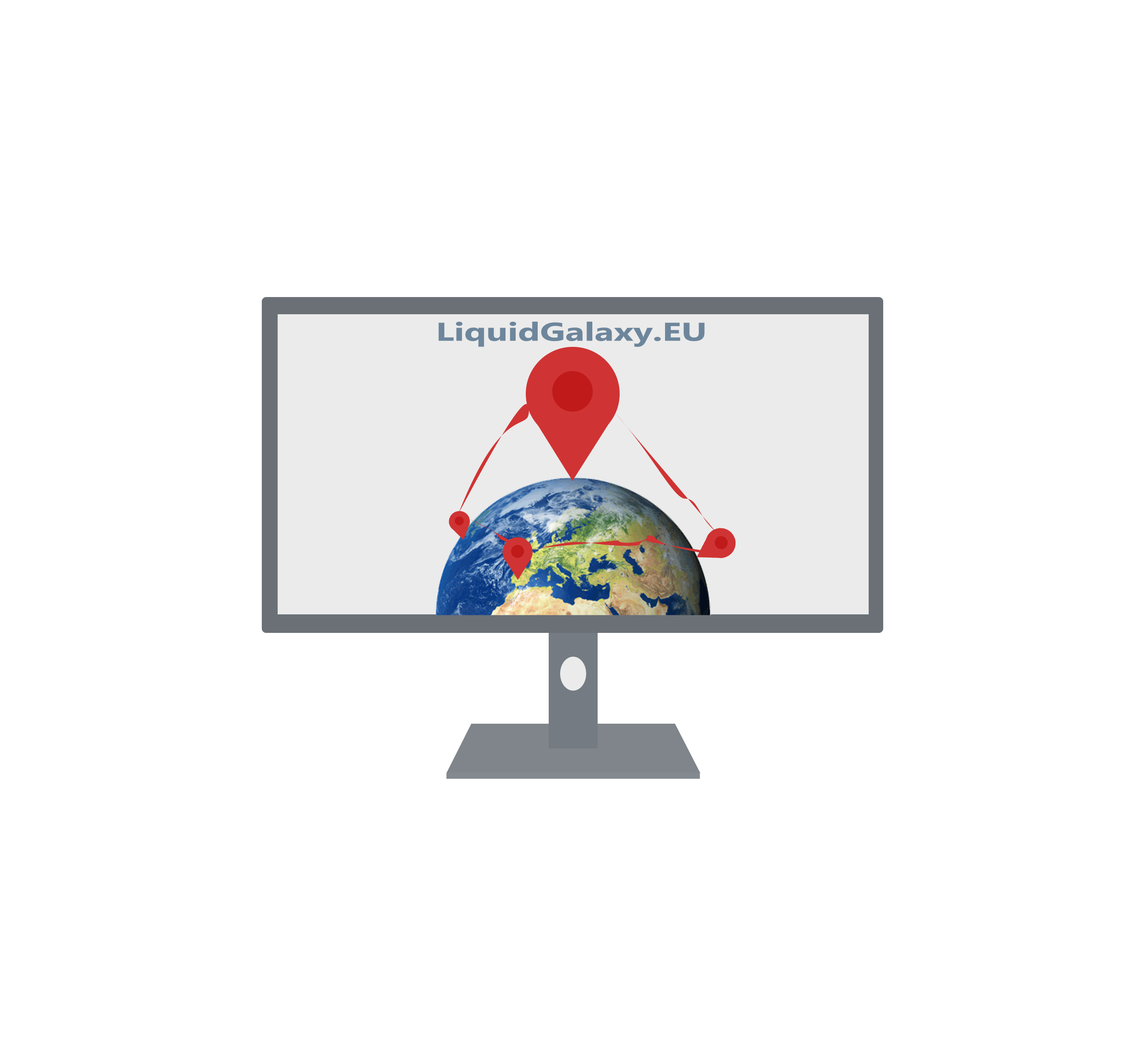
<style>
.page{position:relative;width:1145px;height:1041px;background:#ffffff}
.page>*{position:absolute;margin:0}
.t1{font:25.7px "MicrosoftPhagsPa-Bold";color:#6d869c;scale:1.39 1}
</style>
<div class="page">
<p class="t1" style="left:439px;top:321px;width:266px;height:26px">LiquidGalaxy.EU</p>
</div>
